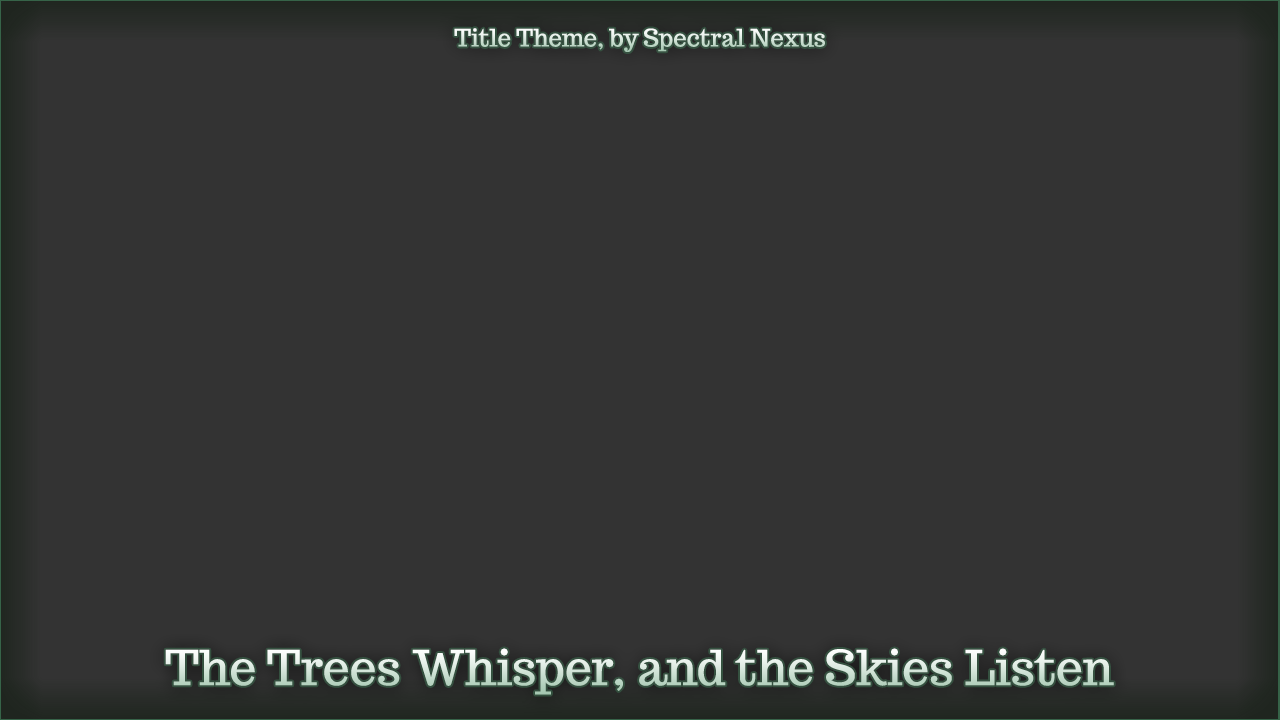
<style>
.page{position:relative;width:1280px;height:720px;background:#333333}
.page>*{position:absolute;margin:0}
.t1{font:24px "Trocchi"}
.t2{font:48px "Trocchi"}
</style>
<div class="page">
<p class="t1" style="left:454px;top:28px;width:371px;height:24px">Title Theme, by Spectral Nexus</p>
<p class="t2" style="left:165px;top:648px;width:949px;height:47px">The Trees Whisper, and the Skies Listen</p>
</div>
